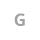
<style>
.page{position:relative;width:40px;height:40px;background:#ffffff}
.page>*{position:absolute;margin:0}
.t1{font:16.7px "OpenSans-Bold";color:#a1a1a1}
</style>
<div class="page">
<p class="t1" style="left:14px;top:13px;width:11px;height:13px">G</p>
</div>
